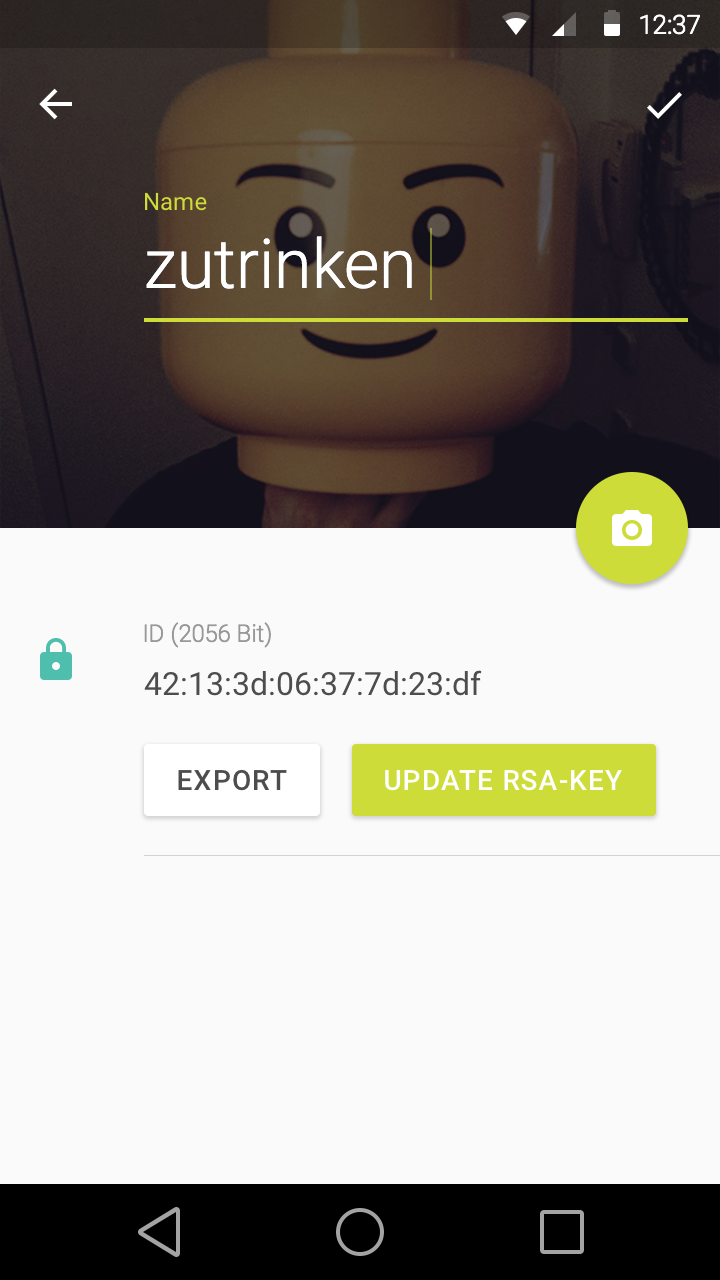
<style>
.page{position:relative;width:720px;height:1280px;background:#fafafa}
.page>*{position:absolute;margin:0}
.t1{font:26.1px "Roboto-Light";color:#ffffff}
.t2{font:24px "Roboto-Regular";color:#cddc39}
.t3{font:68px "Roboto-Light";color:#ffffff}
.t4{font:24px "Roboto-Light";color:#999999}
.t5{font:32px "Roboto-Regular";color:#4d4d4d}
.t6{font:28px "Roboto-Medium";letter-spacing:0.04em;color:#4d4d4d;text-transform:uppercase}
.t7{font:28px "Roboto-Medium";letter-spacing:0.04em;color:#ffffff;text-transform:uppercase}
</style>
<div class="page">
<p class="t1" style="left:640px;top:14px;width:60px;height:21px">12:37</p>
<p class="t2" style="left:145px;top:192px;width:62px;height:19px">Name</p>
<p class="t3" style="left:146px;top:236px;width:266px;height:53px">zutrinken</p>
<p class="t4" style="left:144px;top:622px;width:127px;height:26px">ID (2056 Bit)</p>
<p class="t5" style="left:144px;top:670px;width:338px;height:26px">42:13:3d:06:37:7d:23:df</p>
<p class="t6" style="left:178px;top:769px;width:109px;height:22px">Export</p>
<p class="t7" style="left:385px;top:769px;width:237px;height:22px">Update RSA-Key</p>
</div>
